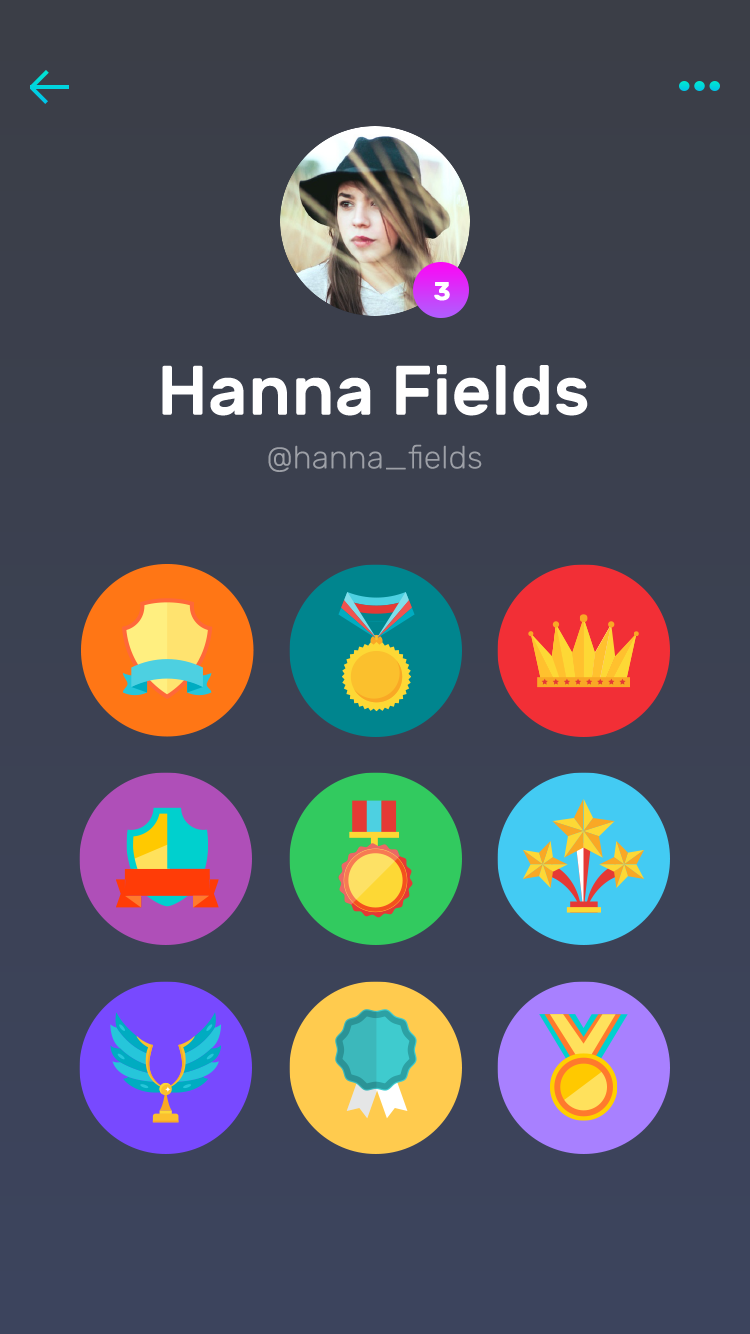
<style>
.page{position:relative;width:750px;height:1334px}
.page>*{position:absolute;margin:0}
.t1{font:26px "Rubik-Bold";color:#ffffff}
.t2{font:70px "Rubik-Medium";color:#ffffff}
.t3{font:32px "Rubik-Light";color:#9da0a7}
</style>
<div class="page">
<p class="t1" style="left:434px;top:282px;width:16px;height:19px">3</p>
<p class="t2" style="left:162px;top:365px;width:426px;height:51px">Hanna Fields</p>
<p class="t3" style="left:268px;top:444px;width:214px;height:28px">@hanna_fields</p>
</div>
